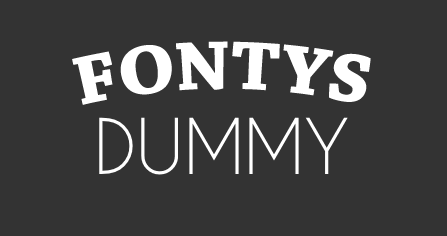
<style>
.page{position:relative;width:447px;height:236px;background:#333333}
.page>*{position:absolute;margin:0}
.t1{font:72px "ChaparralPro-Bold";color:#ffffff}
.t2{font:72px "CaviarDreams";color:#ffffff}
</style>
<div class="page">
<p class="t1" style="left:72px;top:41px;width:299px;height:64px">FONTYS</p>
<p class="t2" style="left:99px;top:117px;width:249px;height:58px">DUMMY</p>
</div>
